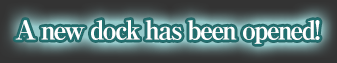
<style>
.page{position:relative;width:337px;height:63px}
.page>*{position:absolute;margin:0}
.t1{font:26px "RyuminPro-ExBold";letter-spacing:-0.08em;color:#ffffff}
</style>
<div class="page">
<p class="t1" style="left:15px;top:20px;width:305px;height:24px">A new dock has been opened!</p>
</div>
